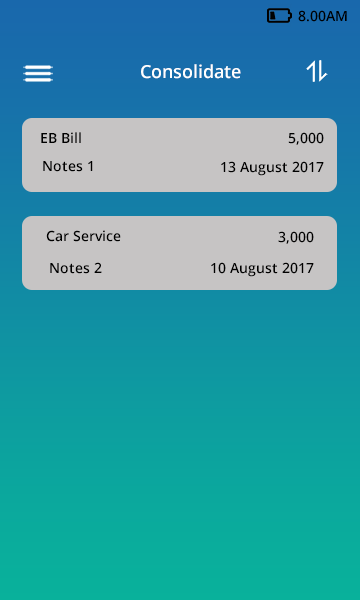
<style>
.page{position:relative;width:360px;height:600px}
.page>*{position:absolute;margin:0}
.t1{font:14px "OpenSans-Semibold";color:#000000}
.t2{font:18px "OpenSans-Semibold";color:#ffffff}
</style>
<div class="page">
<p class="t1" style="left:298px;top:10px;width:49px;height:12px">8.00AM</p>
<p class="t2" style="left:141px;top:64px;width:100px;height:15px">Consolidate</p>
<p class="t1" style="left:41px;top:132px;width:40px;height:11px">EB Bill</p>
<p class="t1" style="left:288px;top:132px;width:36px;height:13px">5,000</p>
<p class="t1" style="left:43px;top:161px;width:50px;height:11px">Notes 1</p>
<p class="t1" style="left:221px;top:161px;width:103px;height:15px">13 August 2017</p>
<p class="t1" style="left:46px;top:230px;width:75px;height:12px">Car Service</p>
<p class="t1" style="left:278px;top:231px;width:36px;height:13px">3,000</p>
<p class="t1" style="left:50px;top:262px;width:52px;height:12px">Notes 2</p>
<p class="t1" style="left:211px;top:262px;width:103px;height:15px">10 August 2017</p>
</div>
